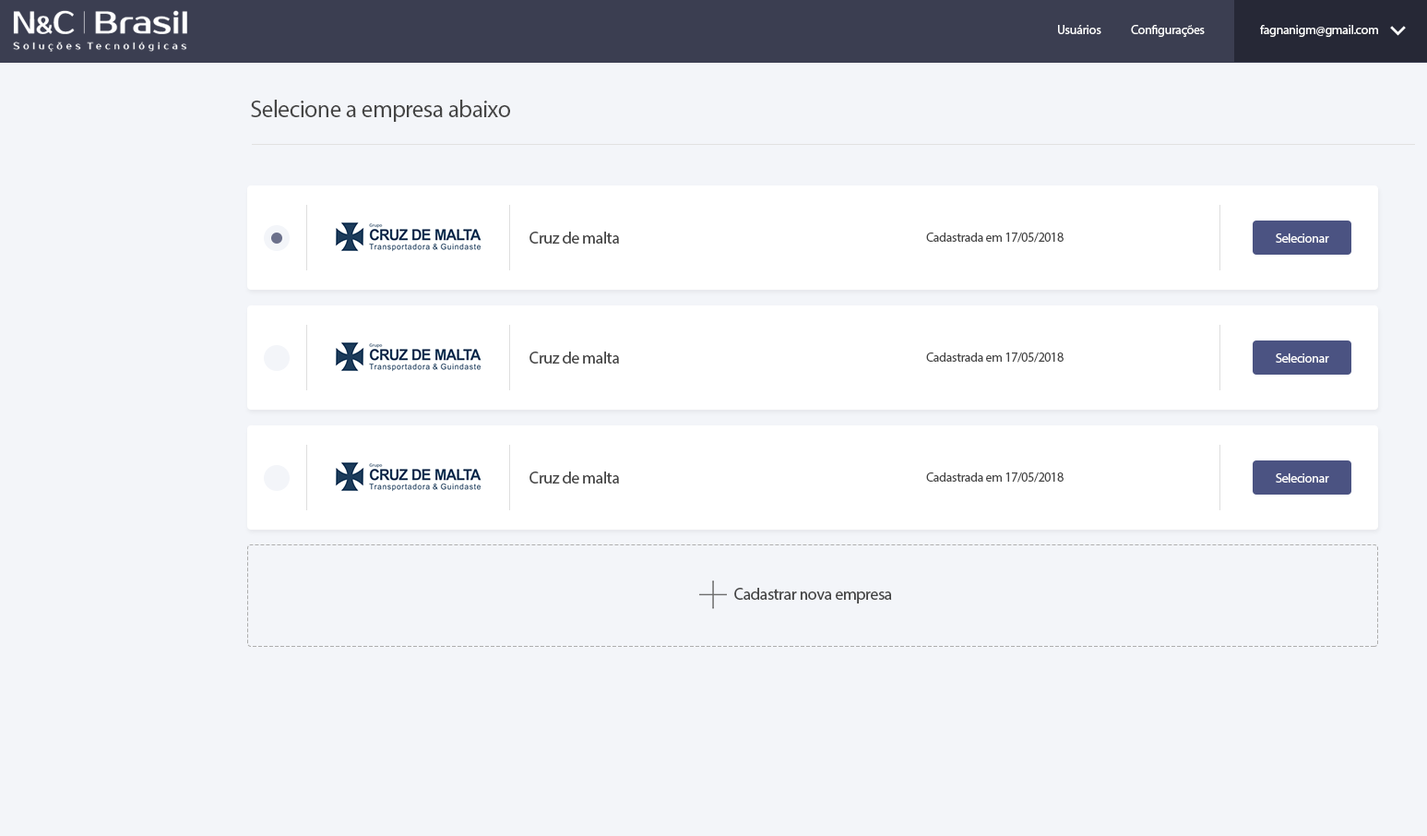
<style>
.page{position:relative;width:1427px;height:836px;background:#f3f5f9}
.page>*{position:absolute;margin:0}
.t1{font:12.9px "MyriadPro-Regular";letter-spacing:-0.025em;color:#ffffff}
.t2{font:24px "MyriadPro-Regular";letter-spacing:-0.025em;color:#454545}
.t3{font:16.6px "MyriadPro-Regular";letter-spacing:-0.025em;color:#454545}
.t4{font:12.9px "MyriadPro-Regular";letter-spacing:-0.025em;color:#454545}
</style>
<div class="page">
<p class="t1" style="left:1058px;top:25px;width:43px;height:9px">Usuários</p>
<p class="t1" style="left:1131px;top:25px;width:74px;height:12px">Configurações</p>
<p class="t1" style="left:1260px;top:25px;width:118px;height:12px">fagnanigm@gmail.com</p>
<p class="t2" style="left:251px;top:100px;width:259px;height:22px">Selecione a empresa abaixo</p>
<p class="t3" style="left:529px;top:232px;width:90px;height:12px">Cruz de malta</p>
<p class="t4" style="left:926px;top:232px;width:137px;height:11px">Cadastrada em 17/05/2018</p>
<p class="t1" style="left:1276px;top:233px;width:53px;height:10px">Selecionar</p>
<p class="t3" style="left:529px;top:351px;width:90px;height:12px">Cruz de malta</p>
<p class="t4" style="left:926px;top:352px;width:137px;height:10px">Cadastrada em 17/05/2018</p>
<p class="t1" style="left:1276px;top:353px;width:53px;height:9px">Selecionar</p>
<p class="t3" style="left:529px;top:471px;width:90px;height:12px">Cruz de malta</p>
<p class="t4" style="left:926px;top:472px;width:137px;height:10px">Cadastrada em 17/05/2018</p>
<p class="t1" style="left:1276px;top:473px;width:53px;height:9px">Selecionar</p>
<p class="t3" style="left:734px;top:588px;width:158px;height:15px">Cadastrar nova empresa</p>
</div>
